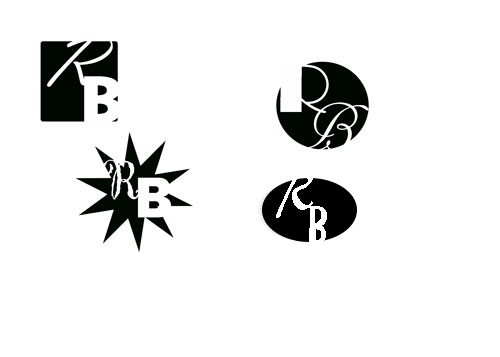
<style>
.page{position:relative;width:500px;height:357px;background:#ffffff}
.page>*{position:absolute;margin:0}
.t1{font:56.4px "ARBERKLEY";color:#ffffff;scale:0.85 1}
.t2{font:48px "ARCHRISTY";color:#ffffff}
</style>
<div class="page">
<p class="t1" style="left:276px;top:171px;width:38px;height:47px">R</p>
<p class="t2" style="left:309px;top:206px;width:18px;height:37px">B</p>
</div>
